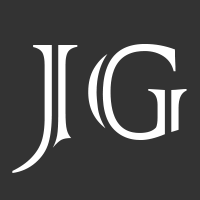
<style>
.page{position:relative;width:200px;height:200px;background:#333333}
.page>*{position:absolute;margin:0}
.t1{font:179.7px "ColonnaMT";color:#ffffff}
</style>
<div class="page">
<p class="t1" style="left:12px;top:44px;width:175px;height:129px">JG</p>
</div>
